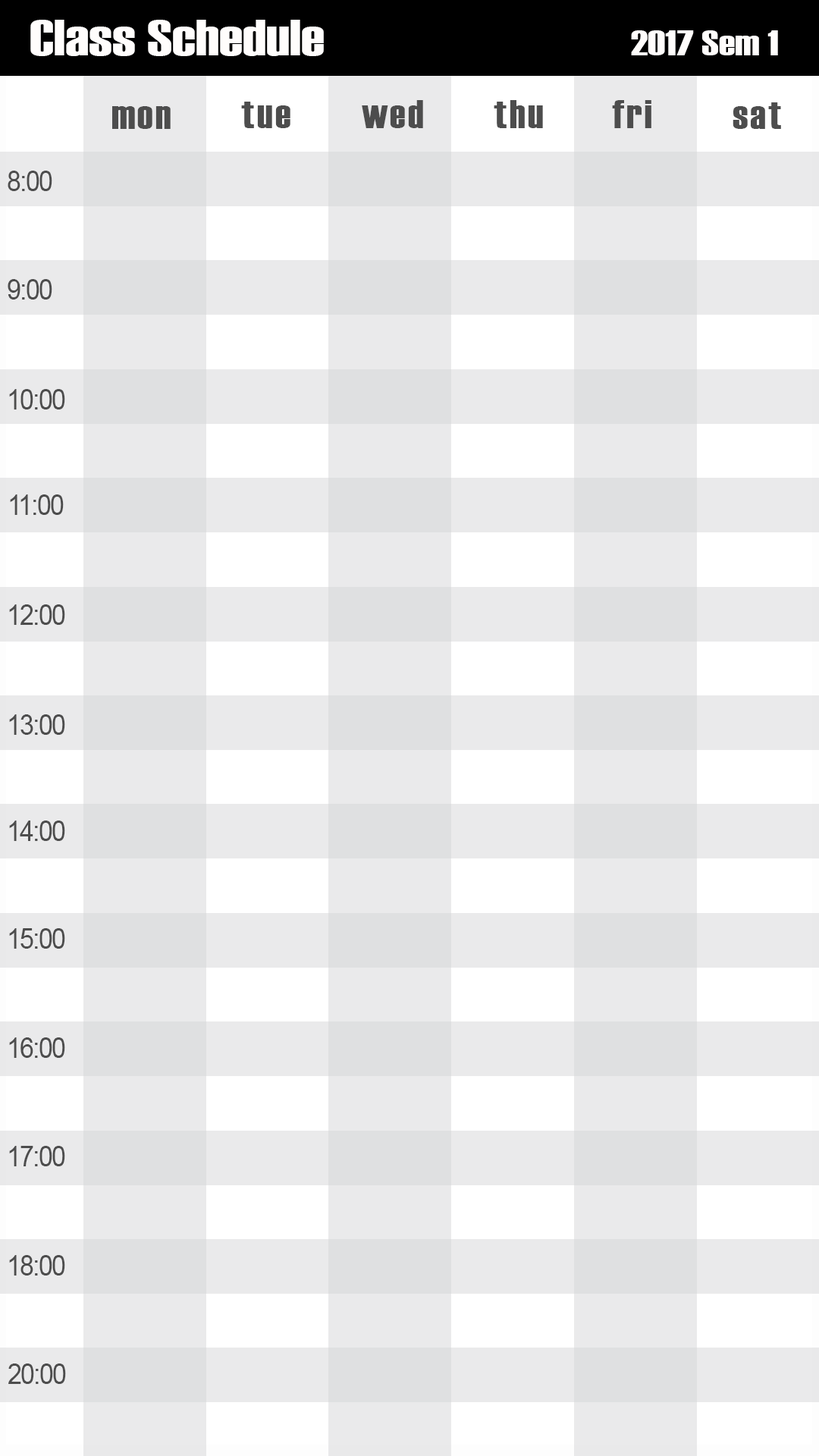
<style>
.page{position:relative;width:819px;height:1456px;background:#eaeaeb}
.page>*{position:absolute;margin:0}
.t1{font:50.6px "Haettenschweiler";color:#fffdfc;scale:1.3 1}
.t2{font:34.8px "Haettenschweiler";color:#fffdfc;scale:1.3 1}
.t3{font:39.8px "Haettenschweiler";letter-spacing:0.05em;color:#4d4d4d;scale:1.11 1}
.t4{font:28.4px "ArialMT";letter-spacing:-0.05em;color:#4d4d4d;scale:0.9 1}
</style>
<div class="page">
<p class="t1" style="left:30px;top:20px;width:294px;height:36px">Class Schedule</p>
<p class="t2" style="left:631px;top:30px;width:147px;height:25px">2017 Sem 1</p>
<p class="t3" style="left:241px;top:102px;width:49px;height:26px">tue</p>
<p class="t3" style="left:362px;top:100px;width:61px;height:28px">wed</p>
<p class="t3" style="left:494px;top:100px;width:49px;height:28px">thu</p>
<p class="t3" style="left:612px;top:100px;width:39px;height:28px">fri</p>
<p class="t3" style="left:112px;top:106px;width:59px;height:23px">mon</p>
<p class="t3" style="left:733px;top:102px;width:48px;height:27px">sat</p>
<p class="t4" style="left:8px;top:171px;width:44px;height:20px">8:00</p>
<p class="t4" style="left:8px;top:279px;width:44px;height:21px">9:00</p>
<p class="t4" style="left:9px;top:389px;width:56px;height:20px">10:00</p>
<p class="t4" style="left:10px;top:494px;width:54px;height:21px">11:00</p>
<p class="t4" style="left:9px;top:604px;width:56px;height:21px">12:00</p>
<p class="t4" style="left:9px;top:714px;width:56px;height:21px">13:00</p>
<p class="t4" style="left:9px;top:821px;width:56px;height:20px">14:00</p>
<p class="t4" style="left:9px;top:928px;width:56px;height:21px">15:00</p>
<p class="t4" style="left:9px;top:1037px;width:56px;height:21px">16:00</p>
<p class="t4" style="left:9px;top:1146px;width:56px;height:20px">17:00</p>
<p class="t4" style="left:9px;top:1255px;width:56px;height:20px">18:00</p>
<p class="t4" style="left:8px;top:1363px;width:58px;height:21px">20:00</p>
</div>
